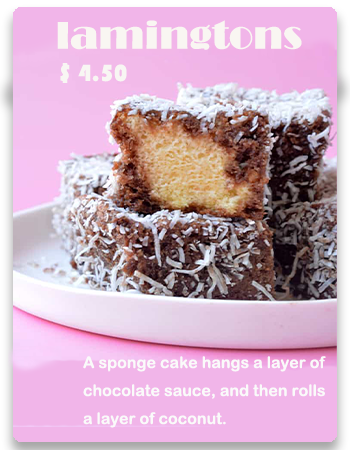
<style>
.page{position:relative;width:350px;height:450px}
.page>*{position:absolute;margin:0}
.t1{font:40px "Broadway";color:#f9f6f2}
.t2{font:24px "STHupo";color:#f8f6f3}
.t3{font:16px "ArialRoundedMTBold";color:#fafafa}
</style>
<div class="page">
<p class="t1" style="left:57px;top:20px;width:245px;height:30px">lamingtons</p>
<p class="t2" style="left:60px;top:63px;width:67px;height:20px">$ 4.50</p>
<p class="t3" style="left:83px;top:356px;width:243px;height:72px">A sponge cake hangs a layer of <br>chocolate sauce, and then rolls <br>a layer of coconut.</p>
</div>
